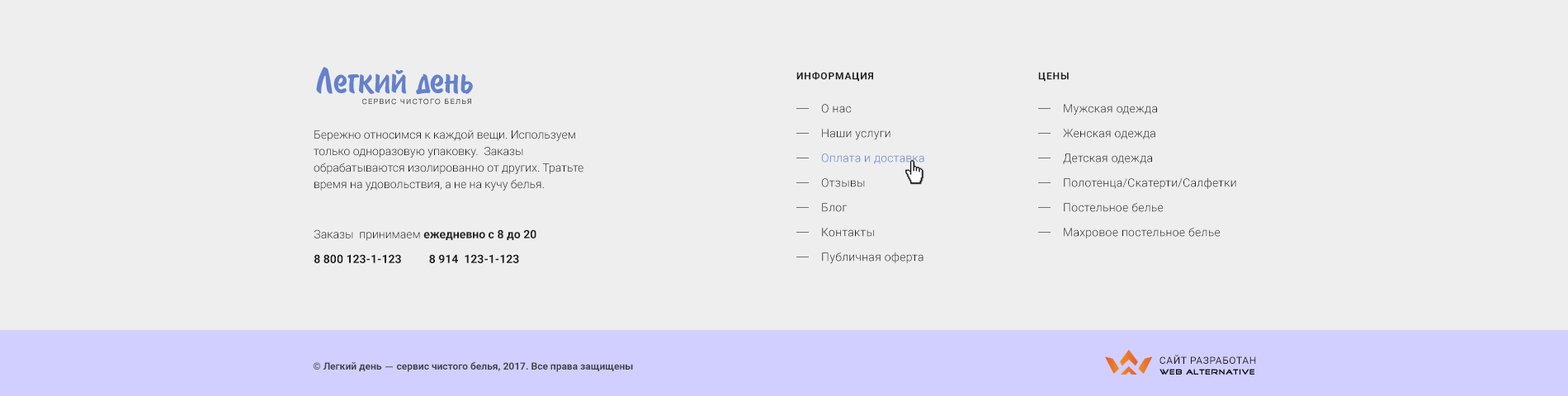
<style>
.page{position:relative;width:1568px;height:396px;background:#eeeeee}
.page>*{position:absolute;margin:0}
.t1{font:9.9px "Roboto-Bold";letter-spacing:0.07em;color:#211d1e;text-transform:uppercase}
.t2{font:11.6px/16.5px "Roboto-Light";letter-spacing:0.02em;color:#211d1e}
.t3{font:11.6px/16.5px "Roboto-Light";letter-spacing:0.02em;color:#6581cc}
.t4{font:11.6px/16.5px "Roboto-Light";color:#211d1e}
.t5{font:11.6px "Roboto-Bold";color:#211d1e}
.t6{font:11.6px "Roboto-Light";color:#211d1e}
.t7{font:9.9px "Roboto-Bold";color:#424242}
.t8{font:9.9px "HelveticaNeue";color:#424242}
.t9{font:9.9px "Roboto-Regular";letter-spacing:0.05em;color:#211d1e;text-transform:uppercase}
</style>
<div class="page">
<p class="t1" style="left:796px;top:72px;width:77px;height:10px">Информация</p>
<p class="t1" style="left:1038px;top:72px;width:31px;height:10px">Цены</p>
<p class="t2" style="left:821px;top:104px;width:103px;height:160px">О нас<br>Наши услуги<br><span class="t3">Оплата и доставка<br></span>Отзывы<br>Блог<br>Контакты<br>Публичная оферта</p>
<p class="t2" style="left:1063px;top:104px;width:173px;height:135px">Мужская одежда<br>Женская одежда<br>Детская одежда<br>Полотенца/Скатерти/Салфетки<br>Постельное белье<br>Махровое постельное белье</p>
<p class="t4" style="left:314px;top:130px;width:269px;height:61px">Бережно относимся к каждой вещи. Используем только одноразовую упаковку.  Заказы обрабатываются изолированно от других. Тратьте время на удовольствия, а не на кучу белья.</p>
<p class="t5" style="left:314px;top:229px;width:222px;height:12px"><span class="t6">Заказы  принимаем </span>ежедневно с 8 до 20</p>
<p class="t5" style="left:314px;top:254px;width:205px;height:9px">8 800 123-1-123          8 914  123-1-123</p>
<p class="t7" style="left:313px;top:361px;width:320px;height:11px">© Легкий день <span class="t8">—</span> сервис чистого белья, 2017. Все права защищены</p>
<p class="t9" style="left:1159px;top:355px;width:97px;height:9px">Сайт разработан</p>
</div>
